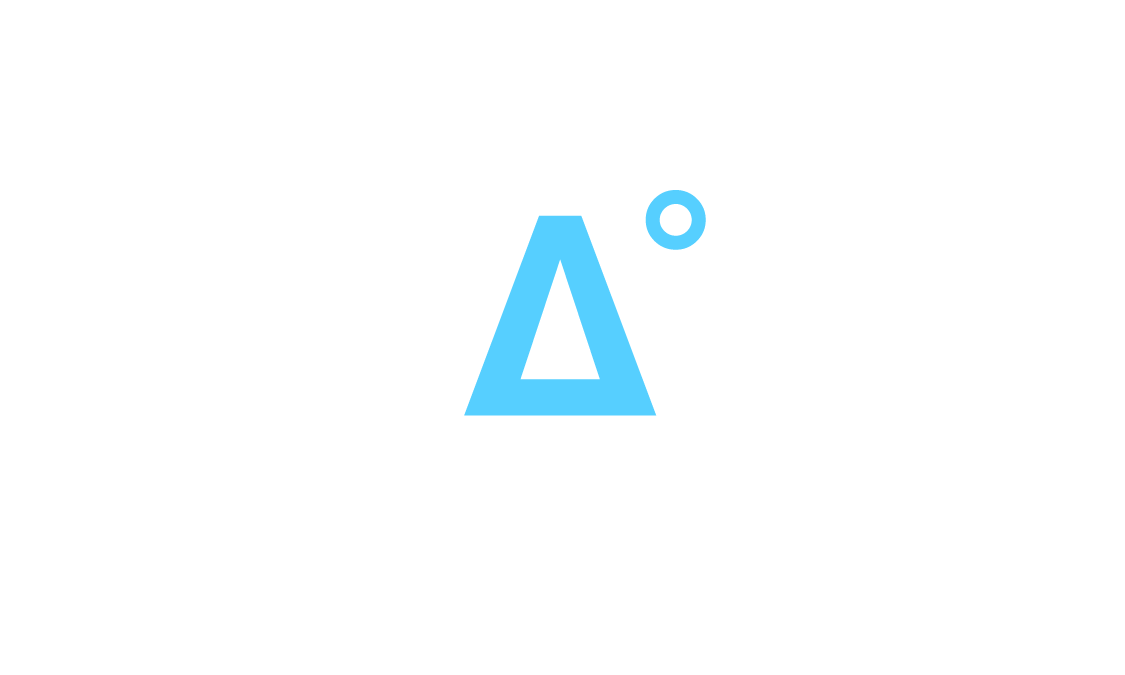
<style>
.page{position:relative;width:1125px;height:675px;background:#ffffff}
.page>*{position:absolute;margin:0}
.t1{font:277.3px "Helvetica-Bold";color:#56cfff}
</style>
<div class="page">
<p class="t1" style="left:464px;top:190px;width:242px;height:226px">∆˚</p>
</div>
